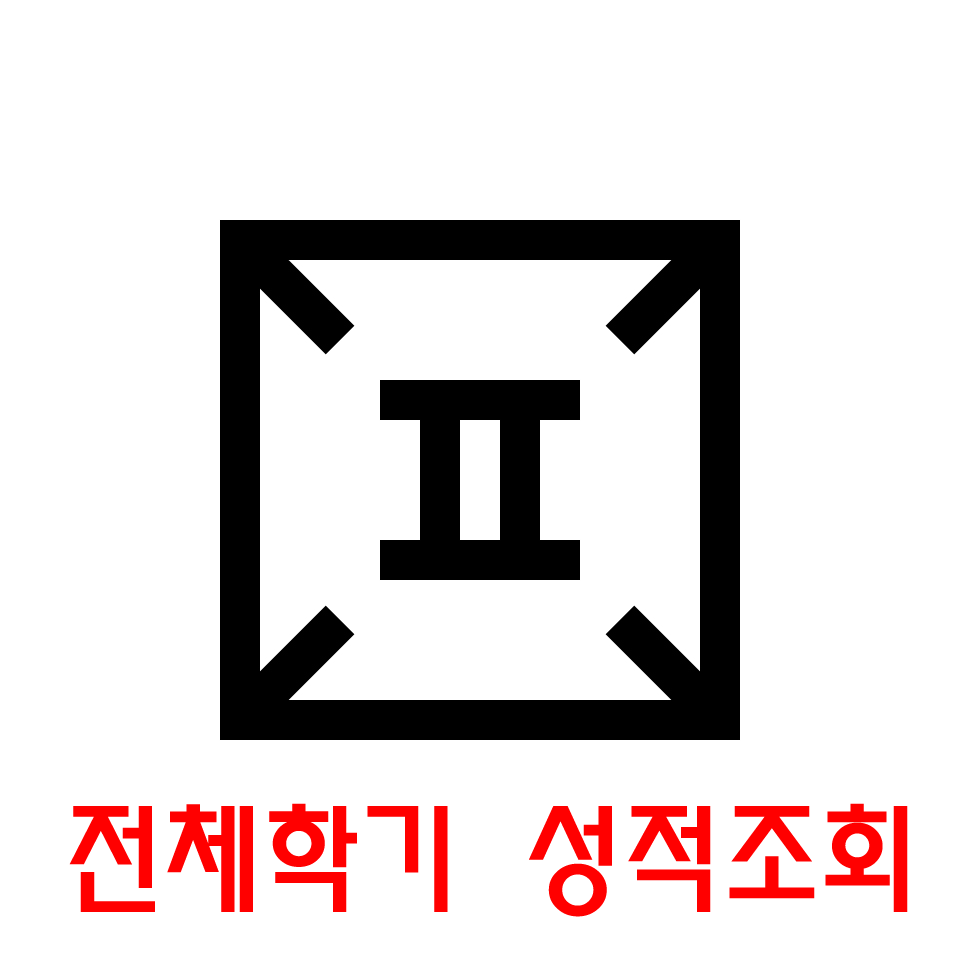
<style>
.page{position:relative;width:960px;height:960px;background:#ffffff}
.page>*{position:absolute;margin:0}
.t1{font:120px "MoeumTR-HM";color:#ff0000}
</style>
<div class="page">
<p class="t1" style="left:69px;top:803px;width:839px;height:114px">전체학기 성적조회</p>
</div>
